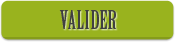
<style>
.page{position:relative;width:175px;height:42px;background:#99b31e}
.page>*{position:absolute;margin:0}
.t1{font:25px "BirchStd";letter-spacing:0.025em;color:#404040;text-transform:uppercase}
</style>
<div class="page">
<p class="t1" style="left:59px;top:10px;width:58px;height:19px">Valider</p>
</div>
